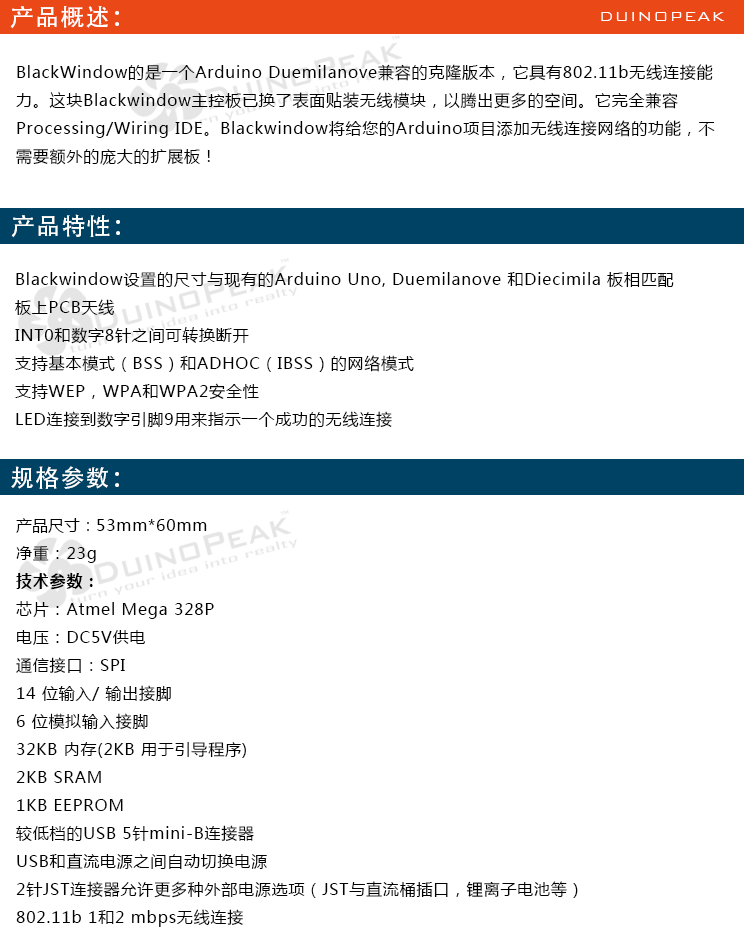
<style>
.page{position:relative;width:744px;height:947px;background:#ffffff}
.page>*{position:absolute;margin:0}
.t1{font:24px "AdobeHeitiStd-Regular";letter-spacing:0.05em;color:#ffffff}
.t2{font:18px "BankGothicBT-Light";letter-spacing:0.05em;color:#ffffff}
.t3{font:16px "MicrosoftYaHei";letter-spacing:0.05em;color:#000000}
.t4{font:16px "MicrosoftYaHei";color:#000000}
.t5{font:16px "MicrosoftYaHei-Bold";letter-spacing:0.05em;color:#000000}
</style>
<div class="page">
<p class="t1" style="left:10px;top:6px;width:109px;height:23px">产品概述：</p>
<p class="t2" style="left:601px;top:12px;width:124px;height:9px">DUINOPEAK</p>
<p class="t3" style="left:16px;top:64px;width:699px;height:101px">BlackWindow的是一个Arduino Duemilanove兼容的克隆版本，它具有802.11b无线连接能<br>力。这块Blackwindow主控板已换了表面贴装无线模块，以腾出更多的空间。它完全兼容<br>Processing/Wiring IDE。Blackwindow将给您的Arduino项目添加无线连接网络的功能，不<br>需要额外的庞大的扩展板！</p>
<p class="t1" style="left:11px;top:214px;width:109px;height:24px">产品特性：</p>
<p class="t3" style="left:15px;top:272px;width:659px;height:156px">Blackwindow设置的尺寸与现有的Arduino Uno, Duemilanove 和Diecimila 板相匹配<br>板上PCB天线<br>INT0和数字8针之间可转换断开<br>支持基本模式（BSS）和ADHOC（IBSS）的网络模式<br>支持WEP，WPA和WPA2安全性<br>LED连接到数字引脚9用来指示一个成功的无线连接</p>
<p class="t1" style="left:11px;top:466px;width:108px;height:23px">规格参数：</p>
<p class="t3" style="left:16px;top:518px;width:562px;height:409px"><span class="t4">产品尺寸：</span>53mm*60mm<br>净重：23g<br><span class="t5">技术参数：<br></span>芯片：Atmel Mega 328P<br>电压：DC5V供电<br>通信接口：SPI<br>14 位输入/ 输出接脚<br>6 位模拟输入接脚<br>32KB 内存(2KB 用于引导程序)<br>2KB SRAM<br>1KB EEPROM<br>较低档的USB 5针mini-B连接器<br>USB和直流电源之间自动切换电源<br>2针JST连接器允许更多种外部电源选项（JST与直流桶插口，锂离子电池等）<br>802.11b 1和2 mbps无线连接</p>
</div>
